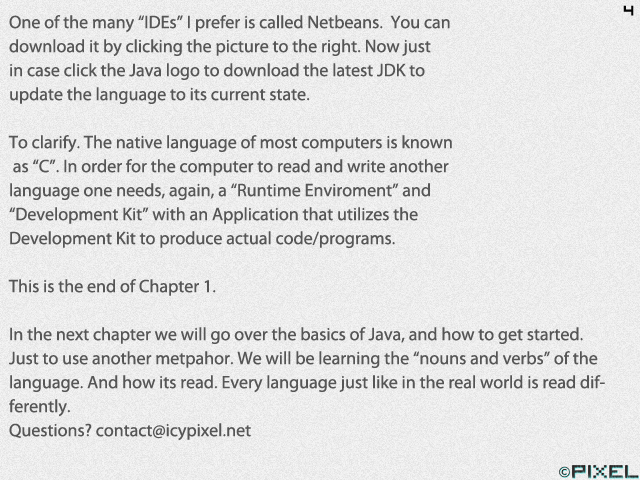
<style>
.page{position:relative;width:640px;height:480px}
.page>*{position:absolute;margin:0}
.t1{font:24px "VisitorTT2BRK";color:#050505}
.t2{font:18px/24px "MyriadPro-Regular";color:#565656}
</style>
<div class="page">
<p class="t1" style="left:623px;top:5px;width:11px;height:11px">4</p>
<p class="t2" style="left:8px;top:15px;width:597px;height:426px">One of the many “IDEs” I prefer is called Netbeans.  You can<br>download it by clicking the picture to the right. Now just<br>in case click the Java logo to download the latest JDK to<br>update the language to its current state.<br><br>To clarify. The native language of most computers is known<br> as “C”. In order for the computer to read and write another <br>language one needs, again, a “Runtime Enviroment” and <br>“Development Kit” with an Application that utilizes the <br>Development Kit to produce actual code/programs.<br><br>This is the end of Chapter 1. <br><br>In the next chapter we will go over the basics of Java, and how to get started. <br>Just to use another metpahor. We will be learning the “nouns and verbs” of the language. And how its read. Every language just like in the real world is read differently.<br>Questions? contact@icypixel.net</p>
</div>
